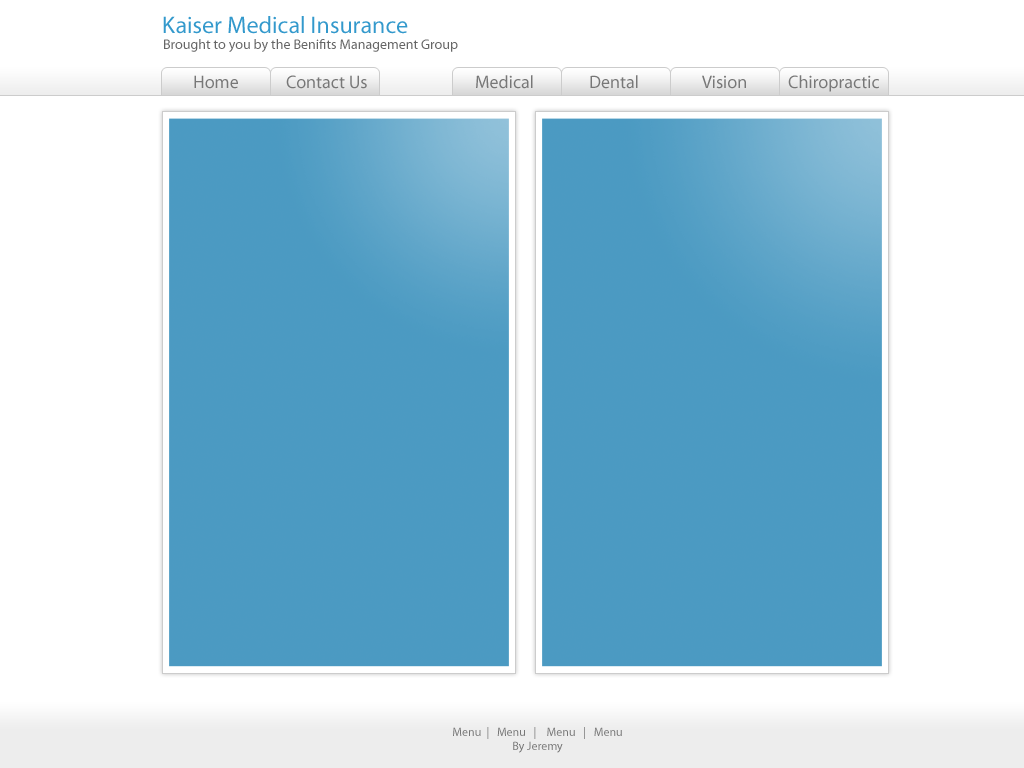
<style>
.page{position:relative;width:1024px;height:768px;background:#ffffff}
.page>*{position:absolute;margin:0}
.t1{font:24px "MyriadPro-Regular";color:#3399cc}
.t2{font:14px "MyriadPro-Regular";color:#666666}
.t3{font:18px "MyriadPro-Regular";color:#777777}
.t4{font:12px "MyriadPro-Regular";color:#777777}
</style>
<div class="page">
<p class="t1" style="left:163px;top:16px;width:245px;height:18px">Kaiser Medical Insurance</p>
<p class="t2" style="left:164px;top:39px;width:294px;height:13px">Brought to you by the Benifits Management Group</p>
<p class="t3" style="left:194px;top:75px;width:44px;height:14px">Home</p>
<p class="t3" style="left:286px;top:75px;width:81px;height:14px">Contact Us</p>
<p class="t3" style="left:476px;top:75px;width:57px;height:14px">Medical</p>
<p class="t3" style="left:590px;top:75px;width:48px;height:14px">Dental</p>
<p class="t3" style="left:702px;top:75px;width:44px;height:14px">Vision</p>
<p class="t3" style="left:788px;top:75px;width:91px;height:17px">Chiropractic</p>
<p class="t4" style="left:453px;top:727px;width:169px;height:26px;text-align:center">Menu  |   Menu   |    Menu   |   Menu<br>By Jeremy</p>
</div>
